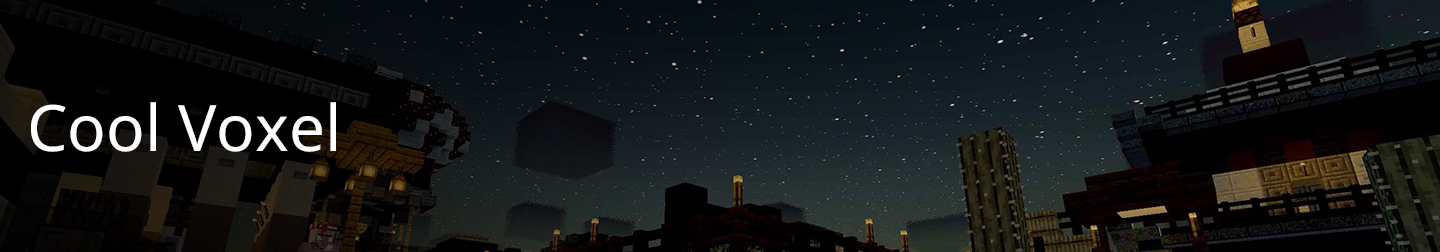
<style>
.page{position:relative;width:1440px;height:252px}
.page>*{position:absolute;margin:0}
.t1{font:64px "NotoSans-Regular";color:#ffffff}
</style>
<div class="page">
<p class="t1" style="left:31px;top:102px;width:305px;height:50px">Cool Voxel</p>
</div>
